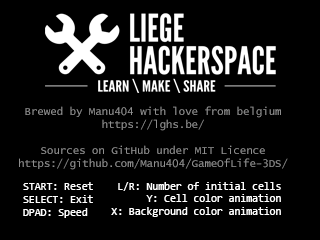
<style>
.page{position:relative;width:320px;height:240px;background:#000000}
.page>*{position:absolute;margin:0}
.t1{font:10.7px "LucidaConsole";color:#8d8d8d}
.t2{font:10.7px "Consolas";color:#ffffff}
</style>
<div class="page">
<p class="t1" style="left:19px;top:106px;width:269px;height:64px;text-align:center">Brewed by Manu404 with love from belgium<br>https://lghs.be/<br><br>Sources on GitHub under MIT Licence<br>https://github.com/Manu404/GameOfLife-3DS/</p>
<p class="t2" style="left:23px;top:182px;width:70px;height:36px">START: Reset<br>SELECT: Exit<br>DPAD: Speed</p>
<p class="t2" style="left:111px;top:182px;width:170px;height:35px;text-align:right">L/R: Number of initial cells<br>Y: Cell color animation<br>X: Background color animation</p>
</div>
